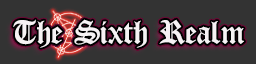
<style>
.page{position:relative;width:256px;height:64px;background:#333333}
.page>*{position:absolute;margin:0}
.t1{font:36px "OldLondon";color:#f6f2f4}
</style>
<div class="page">
<p class="t1" style="left:13px;top:19px;width:231px;height:29px">The Sixth Realm</p>
</div>
